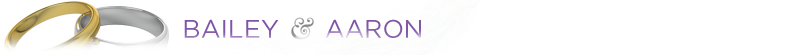
<style>
.page{position:relative;width:790px;height:55px;background:#ffffff}
.page>*{position:absolute;margin:0}
.t1{font:25.3px "GothamHTF-Book";color:#7e54a6;text-transform:uppercase}
</style>
<div class="page">
<p class="t1" style="left:184px;top:19px;width:95px;height:19px">Bailey</p>
<p class="t1" style="left:325px;top:19px;width:96px;height:19px">AARON</p>
</div>
